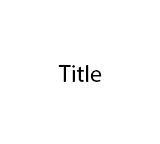
<style>
.page{position:relative;width:160px;height:144px;background:#ffffff}
.page>*{position:absolute;margin:0}
.t1{font:24px "MyriadPro-Regular";color:#000000}
</style>
<div class="page">
<p class="t1" style="left:58px;top:65px;width:44px;height:17px">Title</p>
</div>
